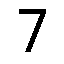
<style>
.page{position:relative;width:64px;height:64px;background:#ffffff}
.page>*{position:absolute;margin:0}
.t1{font:60px "MicrosoftSansSerif";color:#000000}
</style>
<div class="page">
<p class="t1" style="left:19px;top:9px;width:27px;height:43px">7</p>
</div>
